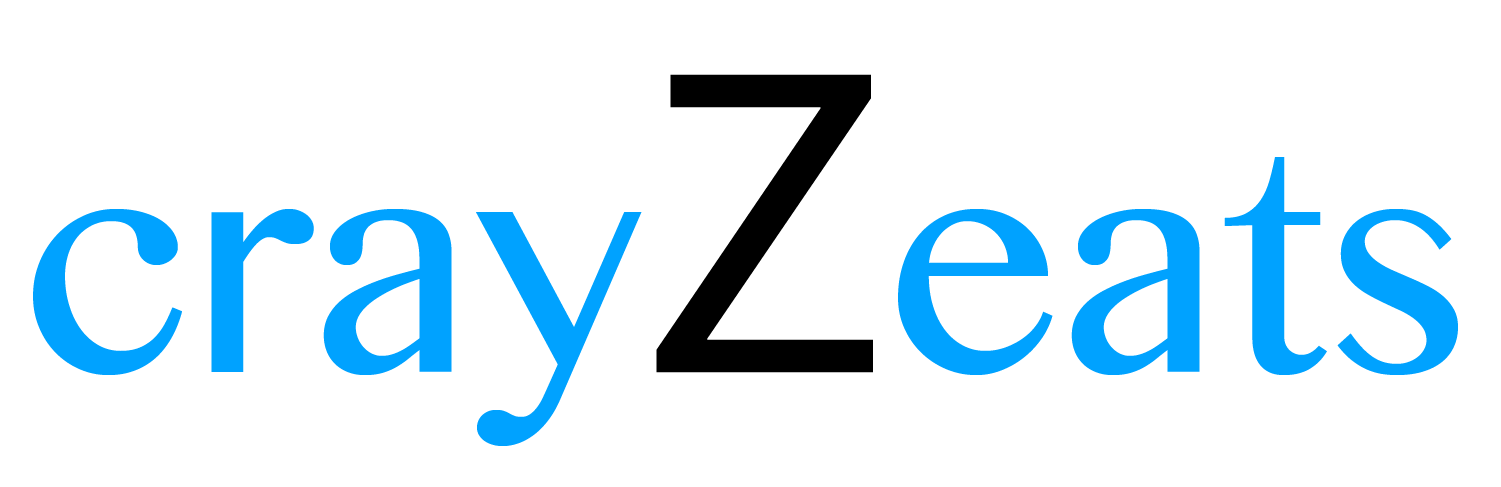
<style>
.page{position:relative;width:1501px;height:487px;background:#ffffff}
.page>*{position:absolute;margin:0}
.t1{font:304.8px "MyanmarMN";color:#00a2ff}
.t2{font:440.3px "MyriadHebrew-Regular";color:#000000}
</style>
<div class="page">
<p class="t1" style="left:33px;top:74px;width:1425px;height:372px">cray<span class="t2">Z</span>eats</p>
</div>
